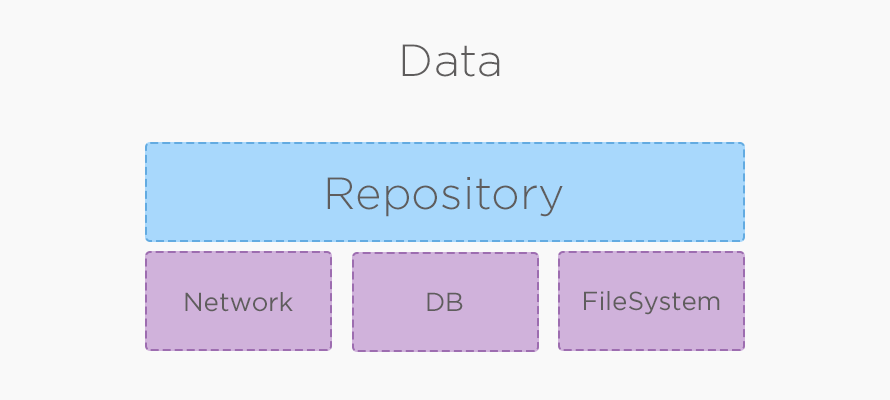
<style>
.page{position:relative;width:890px;height:400px;background:#f9f9f9}
.page>*{position:absolute;margin:0}
.t1{font:45px "GothamPro-Light";color:#5f5d5d}
.t2{font:26px "GothamPro";color:#5f5d5d}
</style>
<div class="page">
<p class="t1" style="left:402px;top:44px;width:98px;height:33px">Data</p>
<p class="t1" style="left:327px;top:177px;width:236px;height:40px">Repository</p>
<p class="t2" style="left:185px;top:292px;width:108px;height:20px">Network</p>
<p class="t2" style="left:427px;top:292px;width:36px;height:19px">DB</p>
<p class="t2" style="left:584px;top:291px;width:136px;height:24px">FileSystem</p>
</div>
